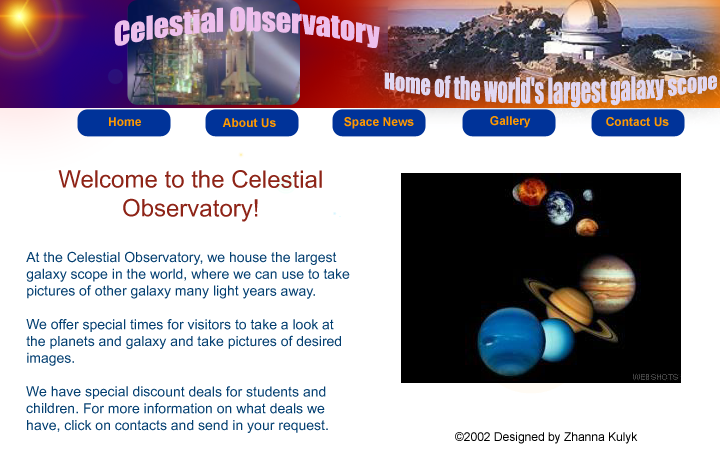
<style>
.page{position:relative;width:720px;height:460px;background:#ffffff}
.page>*{position:absolute;margin:0}
.t1{font:30px "Impact";color:#edbfec}
.t2{font:20px "Impact";color:#e0d7f1}
.t3{font:12px "Arial-BoldMT";color:#ff9900}
.t4{font:14px "ArialMT";color:#033f71}
.t5{font:24px "ArialMT";color:#8e2417}
.t6{font:12px "ArialMT";color:#000000}
</style>
<div class="page">
<p class="t1" style="left:114px;top:6px;width:266px;height:42px">Celestial Observatory</p>
<p class="t2" style="left:384px;top:72px;width:333px;height:36px">Home of the world's largest galaxy scope</p>
<p class="t3" style="left:109px;top:117px;width:32px;height:9px">Home</p>
<p class="t3" style="left:222px;top:118px;width:54px;height:10px">About Us</p>
<p class="t3" style="left:344px;top:117px;width:70px;height:12px">Space News</p>
<p class="t3" style="left:490px;top:116px;width:41px;height:12px">Gallery</p>
<p class="t3" style="left:606px;top:117px;width:63px;height:10px">Contact Us</p>
<p class="t4" style="left:26px;top:170px;width:324px;height:263px;text-align:center"><span class="t5">Welcome to the Celestial Observatory!<br><br></span>At the Celestial Observatory, we house the largest galaxy scope in the world, where we can use to take pictures of other galaxy many light years away.<br><br>We offer special times for visitors to take a look at the planets and galaxy and take pictures of desired images.<br><br>We have special discount deals for students and children. For more information on what deals we have, click on contacts and send in your request.<br><br>We are always updating our Space News and Gallery, so take a look at those sections daily.<br>We hope you enjoy your visit at Celestial Observatory.</p>
<p class="t6" style="left:455px;top:432px;width:183px;height:12px">©2002 Designed by Zhanna Kulyk</p>
</div>
